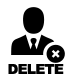
<style>
.page{position:relative;width:71px;height:78px;background:#ffffff}
.page>*{position:absolute;margin:0}
.t1{font:13.6px "Arial-Black";letter-spacing:-0.04em;color:#000000}
</style>
<div class="page">
<p class="t1" style="left:8px;top:64px;width:56px;height:10px">DELETE</p>
</div>
